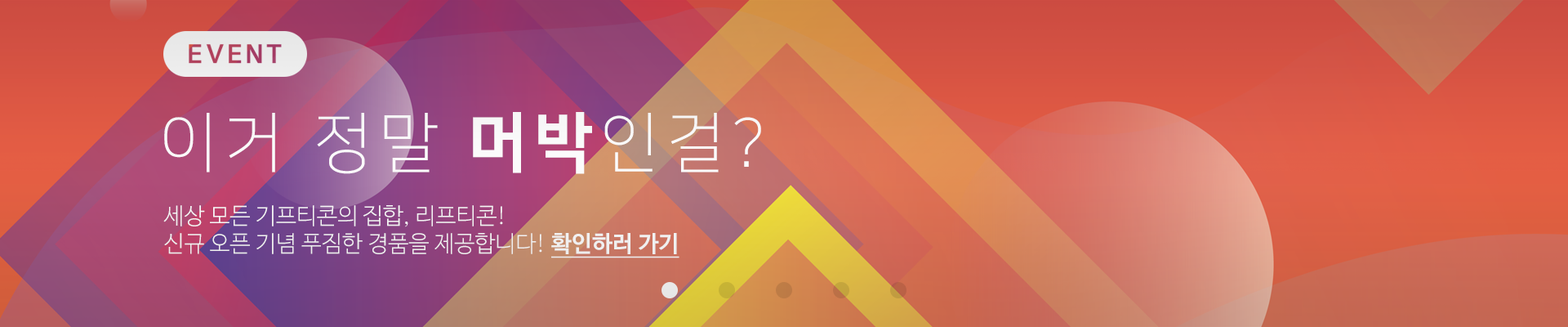
<style>
.page{position:relative;width:1568px;height:327px}
.page>*{position:absolute;margin:0}
.t1{font:65.3px "NanumSquareOTFL";letter-spacing:0.1em;color:#ffffff}
.t2{font:65.3px "NanumSquareOTFEB";letter-spacing:0.1em;color:#ffffff}
.t3{font:22.9px "NanumBarunGothicLight";color:#ffffff}
.t4{font:22.9px "NanumBarunGothicBold";color:#ffffff;text-decoration:underline}
</style>
<div class="page">
<p class="t1" style="left:164px;top:112px;width:597px;height:62px">이거 정말 <span class="t2">머박</span>인걸?</p>
<p class="t3" style="left:163px;top:205px;width:516px;height:53px">세상 모든 기프티콘의 집합, 리프티콘!<br>신규 오픈 기념 푸짐한 경품을 제공합니다! <span class="t4">확인하러 가기</span></p>
</div>
